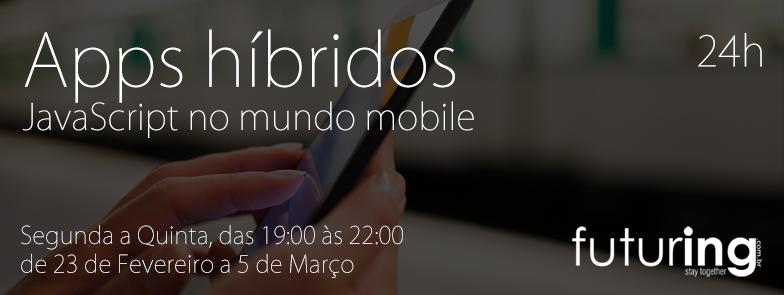
<style>
.page{position:relative;width:784px;height:295px}
.page>*{position:absolute;margin:0}
.t1{font:36px "KozGoPro-ExtraLight";color:#ffffff}
.t2{font:72px "KozGoPro-ExtraLight";color:#ffffff}
.t3{font:42px "KozGoPro-ExtraLight";color:#ffffff}
.t4{font:24px "KozGoPro-ExtraLight";color:#ffffff}
</style>
<div class="page">
<p class="t1" style="left:22px;top:29px;width:452px;height:109px"><span class="t2">Apps híbridos<br></span>JavaScript no mundo mobile</p>
<p class="t3" style="left:698px;top:33px;width:64px;height:34px">24h</p>
<p class="t4" style="left:21px;top:225px;width:382px;height:53px">Segunda a Quinta, das 19:00 às 22:00<br>de 23 de Fevereiro a 5 de Março</p>
</div>
